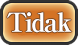
<style>
.page{position:relative;width:78px;height:45px}
.page>*{position:absolute;margin:0}
.t1{font:26px "RyuminPro-ExBold";letter-spacing:-0.08em;color:#ffffff}
</style>
<div class="page">
<p class="t1" style="left:7px;top:12px;width:65px;height:21px">Tidak</p>
</div>
